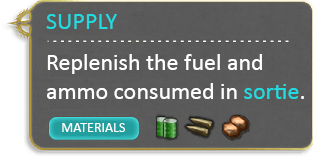
<style>
.page{position:relative;width:313px;height:156px}
.page>*{position:absolute;margin:0}
.t1{font:24px "Calibri";color:#20dbe0}
.t2{font:24px "Calibri";color:#ffffff}
.t3{font:14px "Calibri";color:#ffffff}
</style>
<div class="page">
<p class="t1" style="left:46px;top:14px;width:71px;height:15px">SUPPLY</p>
<p class="t2" style="left:47px;top:54px;width:257px;height:45px">Replenish the fuel and<br>ammo consumed in <span class="t1">sortie</span>.</p>
<p class="t3" style="left:62px;top:123px;width:63px;height:9px">MATERIALS</p>
</div>
